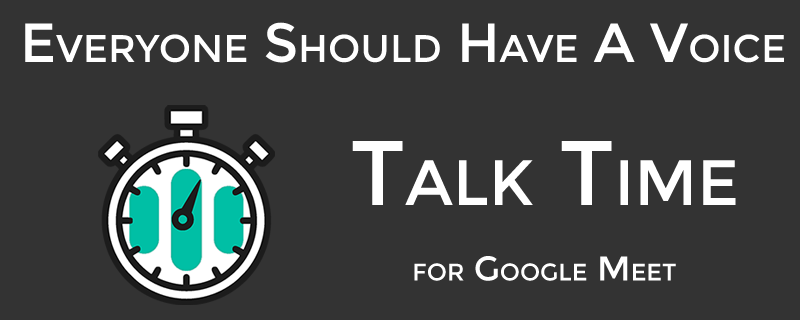
<style>
.page{position:relative;width:800px;height:320px;background:#333333}
.page>*{position:absolute;margin:0}
.t1{font:55px "Montserrat-Regular";color:#ffffff;font-variant:small-caps}
.t2{font:34.3px "Montserrat-Regular";color:#ffffff;font-variant:small-caps}
.t3{font:91.4px "Montserrat-Regular";color:#ffffff;font-variant:small-caps}
</style>
<div class="page">
<p class="t1" style="left:25px;top:22px;width:759px;height:41px">Everyone Should Have A Voice</p>
<p class="t2" style="left:352px;top:141px;width:384px;height:140px;text-align:center"><span class="t3">Talk Time<br><br></span>for Google Meet</p>
</div>
